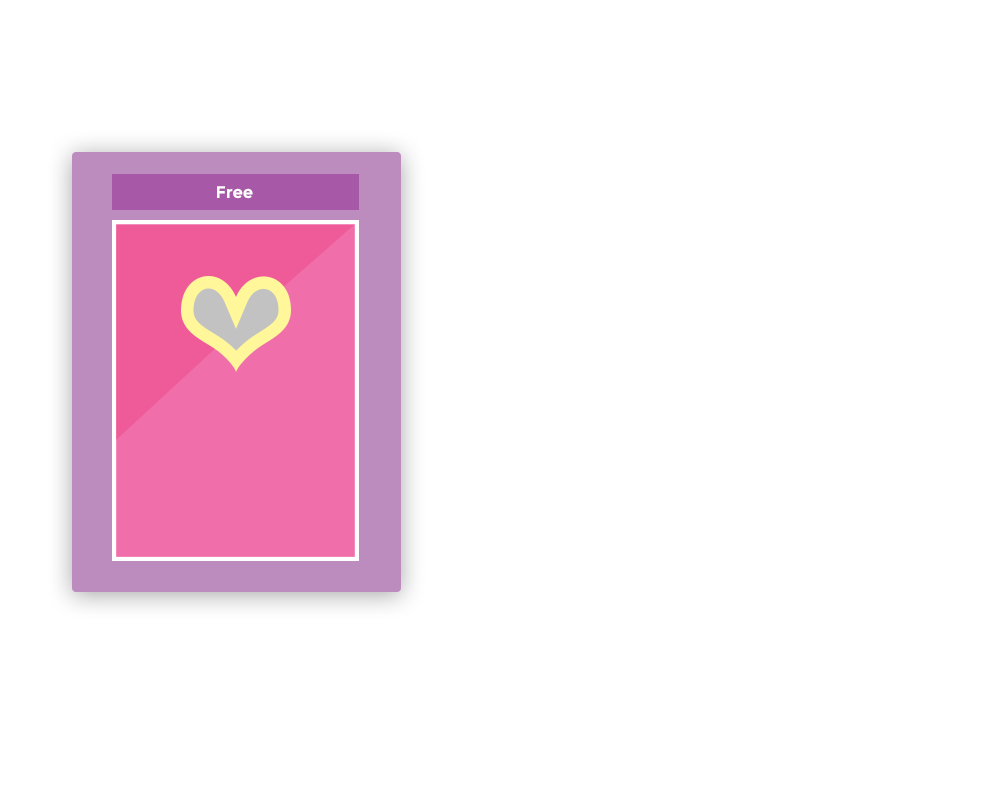
<style>
.page{position:relative;width:1000px;height:800px;background:#ffffff}
.page>*{position:absolute;margin:0}
.t1{font:16.7px "Montserrat-Bold";color:#ffffff}
</style>
<div class="page">
<p class="t1" style="left:217px;top:186px;width:36px;height:13px">Free</p>
</div>
